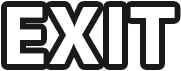
<style>
.page{position:relative;width:181px;height:71px;background:#ffffff}
.page>*{position:absolute;margin:0}
.t1{font:85px "MyriadPro-Bold";letter-spacing:0.025em;color:#ffffff}
</style>
<div class="page">
<p class="t1" style="left:7px;top:7px;width:168px;height:57px">EXIT</p>
</div>
